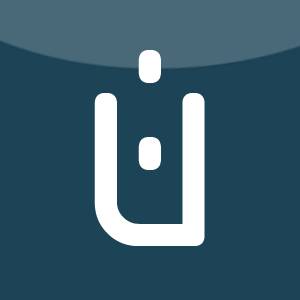
<style>
.page{position:relative;width:300px;height:300px;background:#1c4456}
.page>*{position:absolute;margin:0}
.t1{font:340.1px "ISOCPEUR";color:#ffffff}
</style>
<div class="page">
<p class="t1" style="left:138px;top:50px;width:23px;height:121px">:</p>
<p class="t1" style="left:94px;top:93px;width:111px;height:153px">u</p>
</div>
